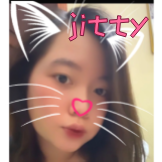
<style>
.page{position:relative;width:162px;height:162px}
.page>*{position:absolute;margin:0}
.t1{font:36px "ZCOOLKuaiLe-Regular"}
</style>
<div class="page">
<p class="t1" style="left:67px;top:11px;width:83px;height:32px">jitty</p>
</div>
